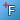
<style>
.page{position:relative;width:20px;height:20px}
.page>*{position:absolute;margin:0}
.t1{font:12px "Tahoma";color:#ffffff}
</style>
<div class="page">
<p class="t1" style="left:9px;top:6px;width:6px;height:9px">F</p>
</div>
